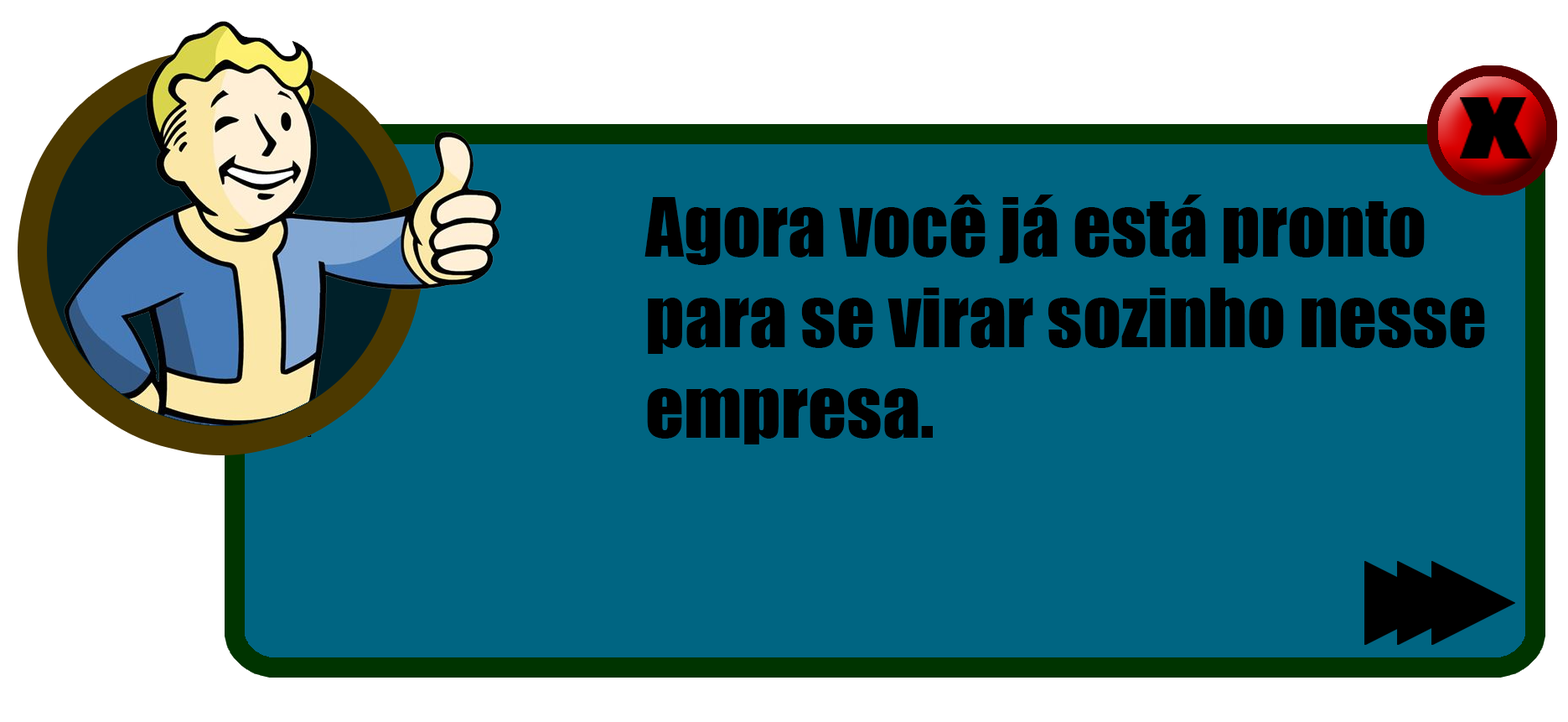
<style>
.page{position:relative;width:1568px;height:722px;background:#006582}
.page>*{position:absolute;margin:0}
.t1{font:75.4px "Impact";color:#000000}
</style>
<div class="page">
<p class="t1" style="left:644px;top:194px;width:841px;height:250px">Agora você já está pronto<br>para se virar sozinho nesse<br>empresa.</p>
</div>
